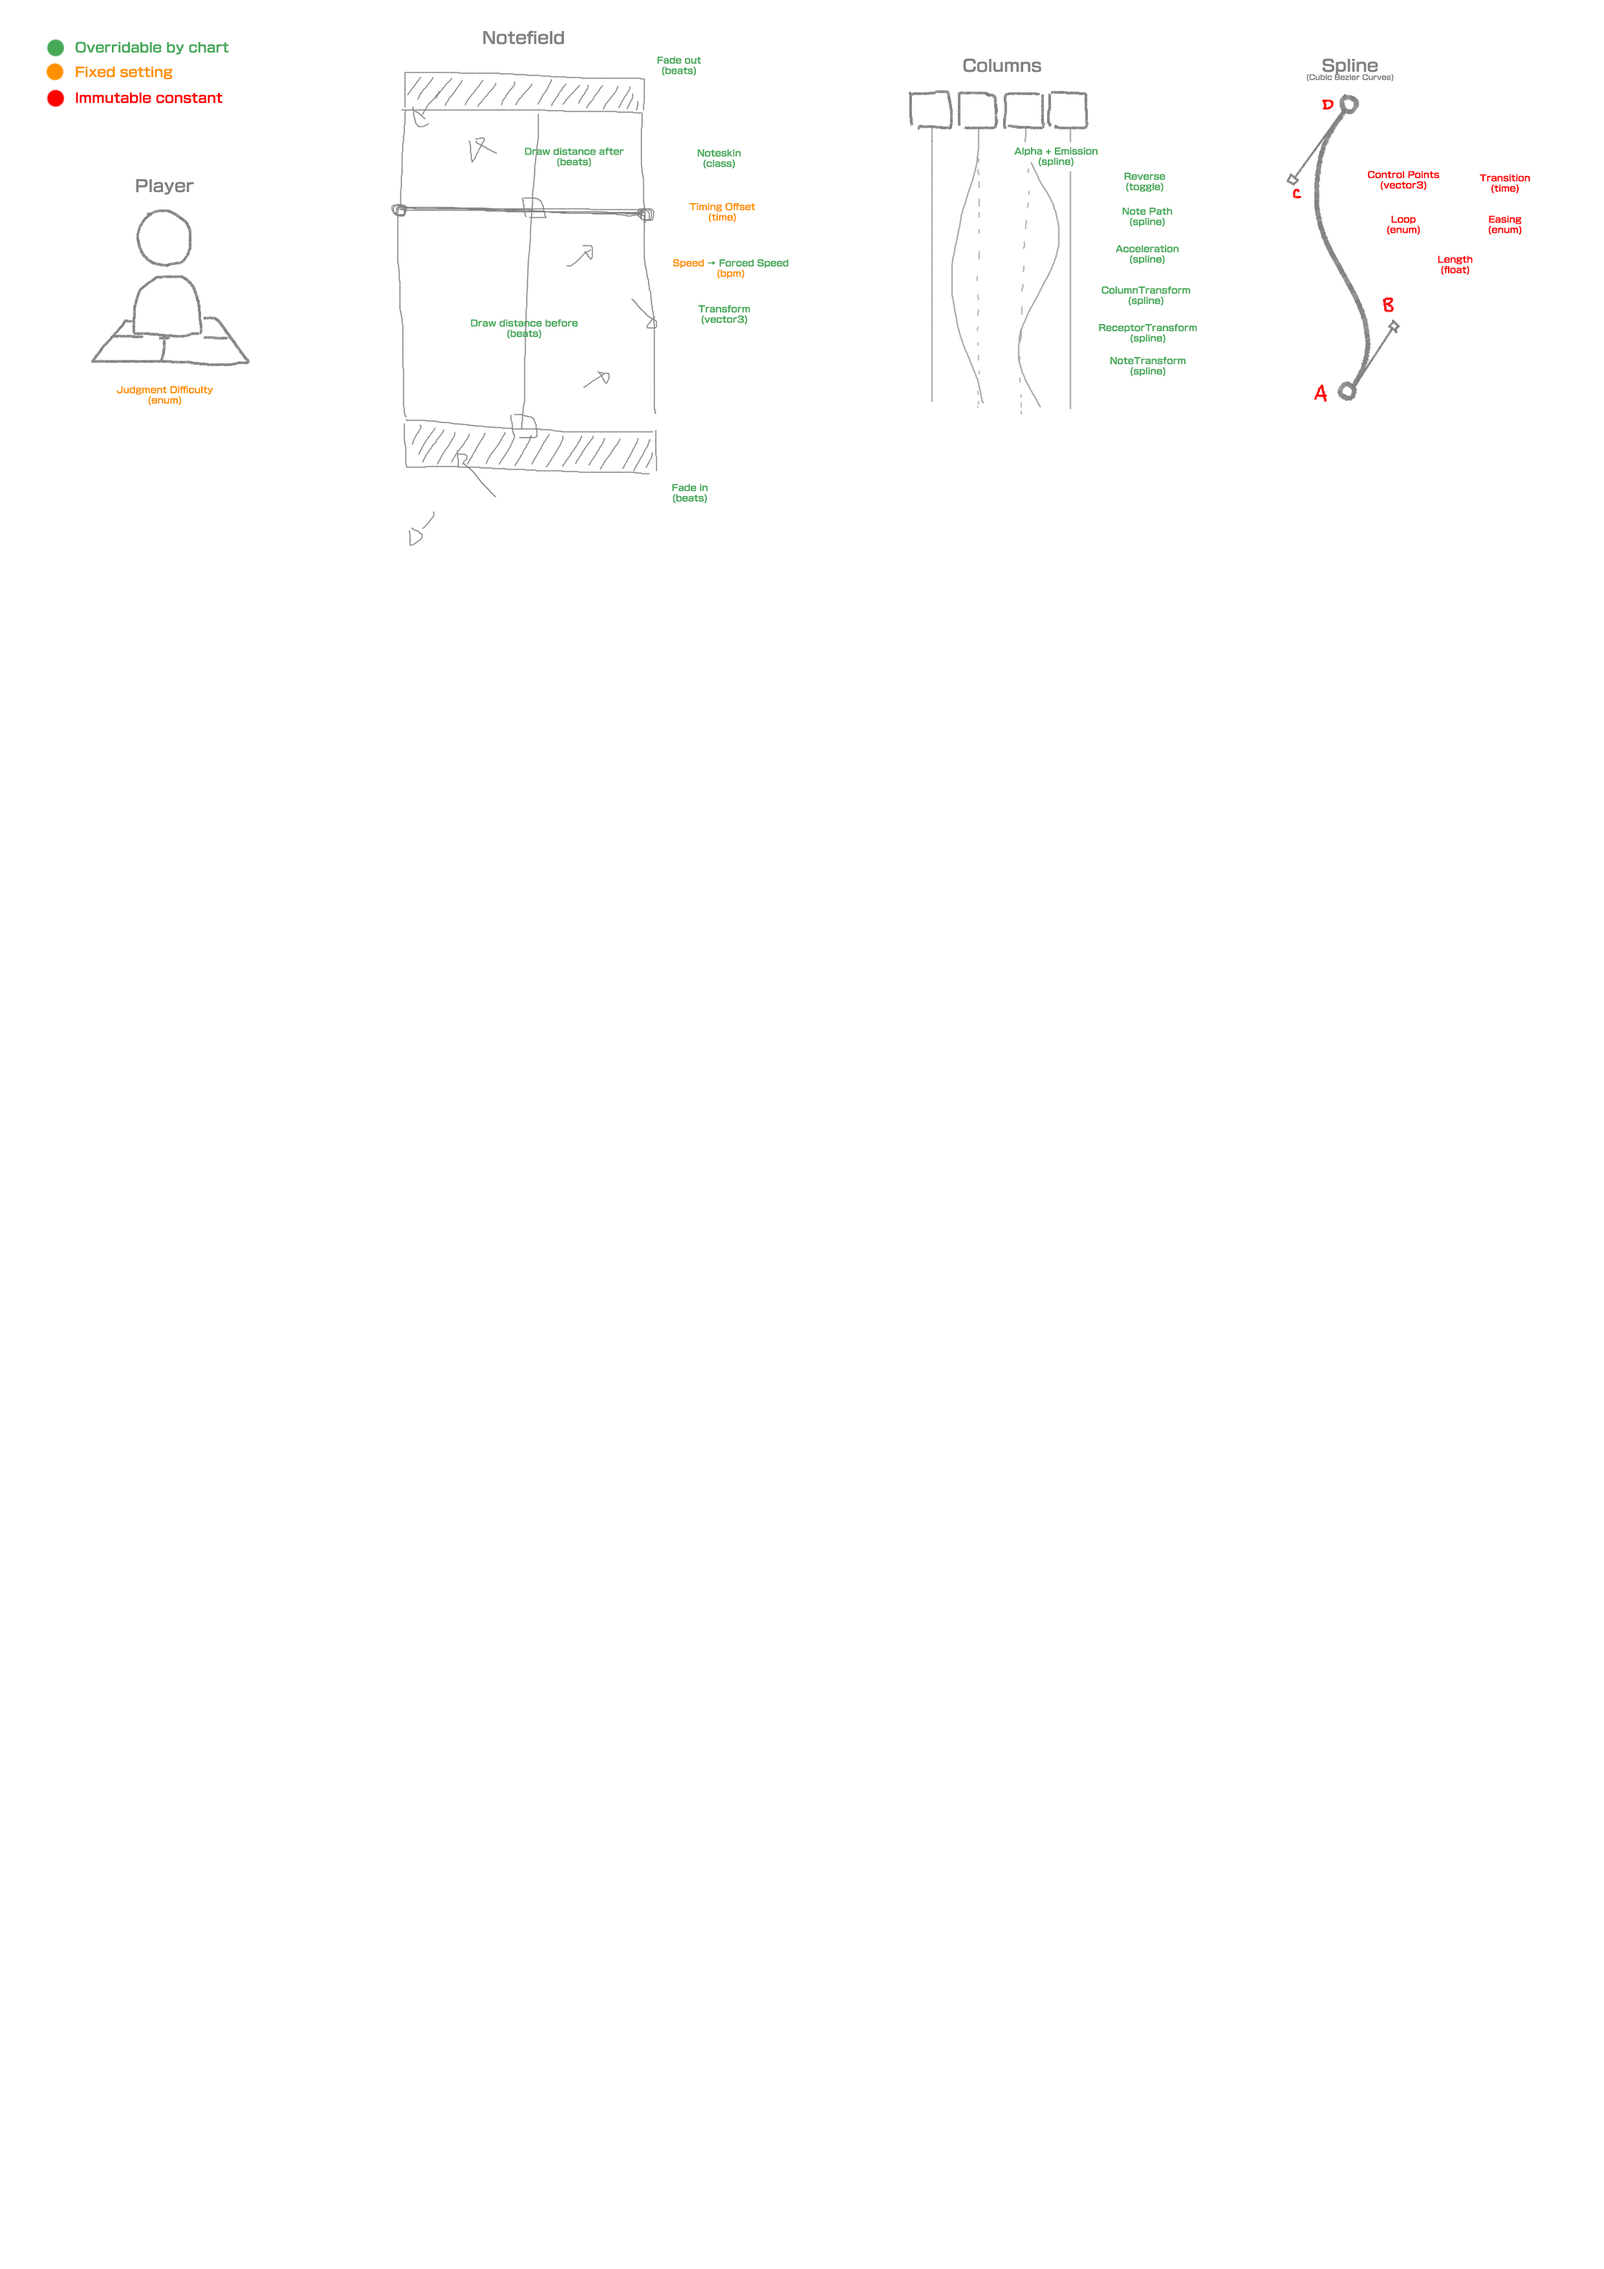
<style>
.page{position:relative;width:1604px;height:2269px;background:#ffffff}
.page>*{position:absolute;margin:0}
.t1{font:12.9px "NewRodinPro-B";color:#45a958}
.t2{font:16px "NewRodinPro-B";color:#808080}
.t3{font:8.7px "NewRodinPro-B";color:#45a958}
.t4{font:7px "NewRodinPro-B";color:#808080}
.t5{font:12.9px "NewRodinPro-B";color:#ff9000}
.t6{font:12.9px "NewRodinPro-B";color:#ff0000}
.t7{font:8.7px "NewRodinPro-B";color:#ff0000}
.t8{font:8.7px "NewRodinPro-B";color:#ff9000}
</style>
<div class="page">
<p class="t1" style="left:75px;top:41px;width:154px;height:14px">Overridable by chart</p>
<p class="t2" style="left:483px;top:30px;width:81px;height:15px">Notefield</p>
<p class="t3" style="left:657px;top:56px;width:44px;height:20px;text-align:center">Fade out<br>(beats)</p>
<p class="t2" style="left:963px;top:58px;width:78px;height:14px">Columns</p>
<p class="t4" style="left:1306px;top:58px;width:88px;height:23px;text-align:center"><span class="t2">Spline<br></span>(Cubic Bezier Curves)</p>
<p class="t5" style="left:76px;top:67px;width:97px;height:13px">Fixed setting</p>
<p class="t6" style="left:76px;top:92px;width:146px;height:11px">Immutable constant</p>
<p class="t3" style="left:524px;top:147px;width:100px;height:20px;text-align:center">Draw distance after<br>(beats)</p>
<p class="t3" style="left:697px;top:149px;width:44px;height:20px;text-align:center">Noteskin<br>(class)</p>
<p class="t3" style="left:1014px;top:147px;width:83px;height:20px;text-align:center">Alpha + Emission<br>(spline)</p>
<p class="t3" style="left:1124px;top:173px;width:41px;height:19px;text-align:center">Reverse<br>(toggle)</p>
<p class="t7" style="left:1368px;top:171px;width:71px;height:19px;text-align:center">Control Points<br>(vector3)</p>
<p class="t7" style="left:1480px;top:174px;width:50px;height:19px;text-align:center">Transition<br>(time)</p>
<p class="t2" style="left:136px;top:179px;width:58px;height:16px">Player</p>
<p class="t8" style="left:689px;top:202px;width:66px;height:20px;text-align:center">Timing Offset<br>(time)</p>
<p class="t3" style="left:1122px;top:208px;width:50px;height:19px;text-align:center">Note Path<br>(spline)</p>
<p class="t7" style="left:1386px;top:215px;width:34px;height:20px;text-align:center">Loop<br>(enum)</p>
<p class="t7" style="left:1488px;top:215px;width:34px;height:20px;text-align:center">Easing<br>(enum)</p>
<p class="t3" style="left:1116px;top:245px;width:63px;height:19px;text-align:center">Acceleration<br>(spline)</p>
<p class="t7" style="left:1438px;top:255px;width:34px;height:20px;text-align:center">Length<br>(float)</p>
<p class="t3" style="left:673px;top:259px;width:115px;height:20px;text-align:center"><span class="t8">Speed </span>→ Forced Speed<br><span class="t8">(bpm)</span></p>
<p class="t3" style="left:1101px;top:286px;width:89px;height:20px;text-align:center">ColumnTransform<br>(spline)</p>
<p class="t3" style="left:698px;top:305px;width:52px;height:20px;text-align:center">Transform<br>(vector3)</p>
<p class="t3" style="left:471px;top:319px;width:107px;height:20px;text-align:center">Draw distance before<br>(beats)</p>
<p class="t3" style="left:1099px;top:323px;width:98px;height:20px;text-align:center">ReceptorTransform<br>(spline)</p>
<p class="t3" style="left:1110px;top:356px;width:75px;height:20px;text-align:center">NoteTransform<br>(spline)</p>
<p class="t8" style="left:116px;top:385px;width:97px;height:20px;text-align:center">Judgment Difficulty<br>(enum)</p>
<p class="t3" style="left:672px;top:484px;width:35px;height:19px;text-align:center">Fade in<br>(beats)</p>
</div>
